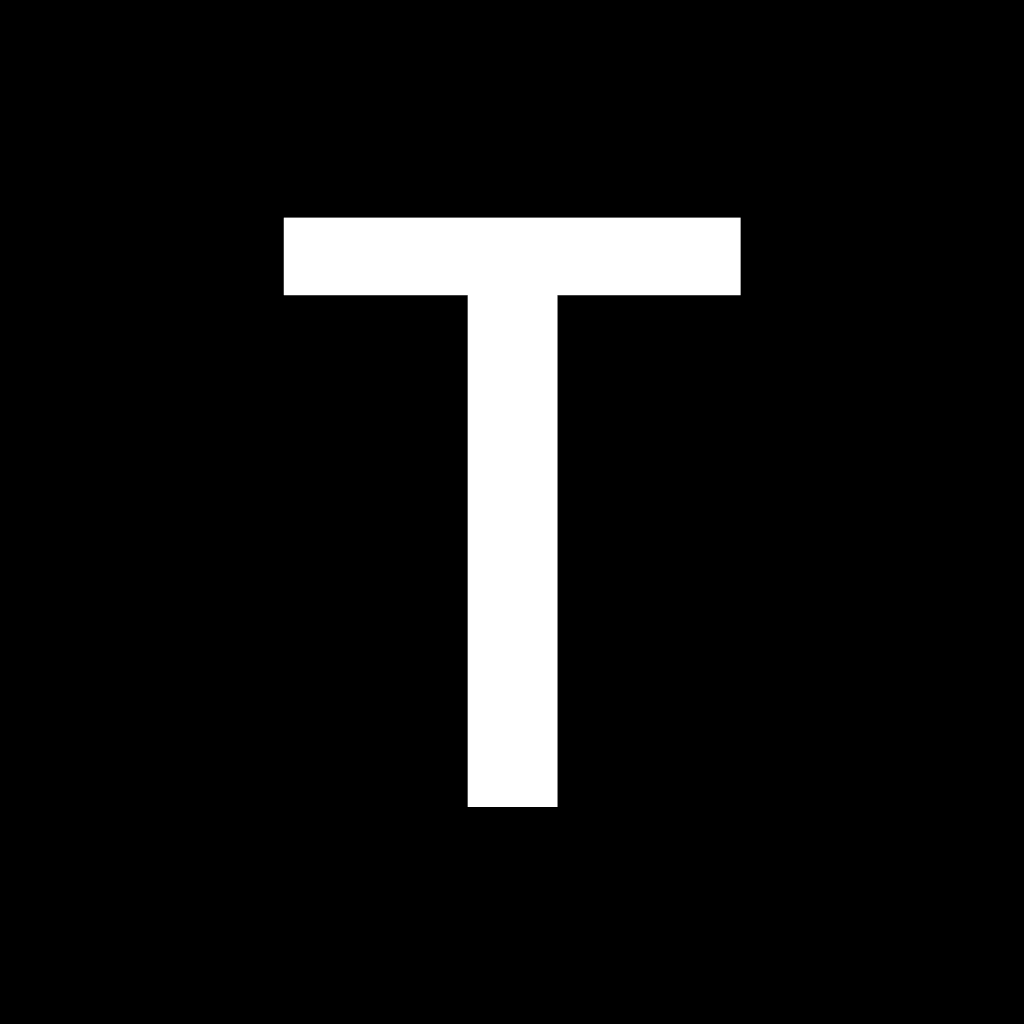
<style>
.page{position:relative;width:1024px;height:1024px;background:#000000}
.page>*{position:absolute;margin:0}
.t1{font:833.3px "Pretendard-Medium";color:#ffffff}
</style>
<div class="page">
<p class="t1" style="left:283px;top:217px;width:458px;height:590px">T</p>
</div>
